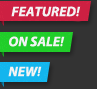
<style>
.page{position:relative;width:97px;height:89px;background:#333333}
.page>*{position:absolute;margin:0}
.t1{font:14px "MyriadPro-BoldIt";color:#f3f3f3}
</style>
<div class="page">
<p class="t1" style="left:11px;top:6px;width:70px;height:11px">FEATURED!</p>
<p class="t1" style="left:9px;top:36px;width:56px;height:11px">ON SALE!</p>
<p class="t1" style="left:8px;top:66px;width:34px;height:11px">NEW!</p>
</div>
